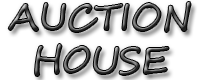
<style>
.page{position:relative;width:200px;height:80px;background:#ffffff}
.page>*{position:absolute;margin:0}
.t1{font:36px "SegoeScript"}
</style>
<div class="page">
<p class="t1" style="left:8px;top:2px;width:183px;height:74px;text-align:center">AUCTION<br>HOUSE</p>
</div>
